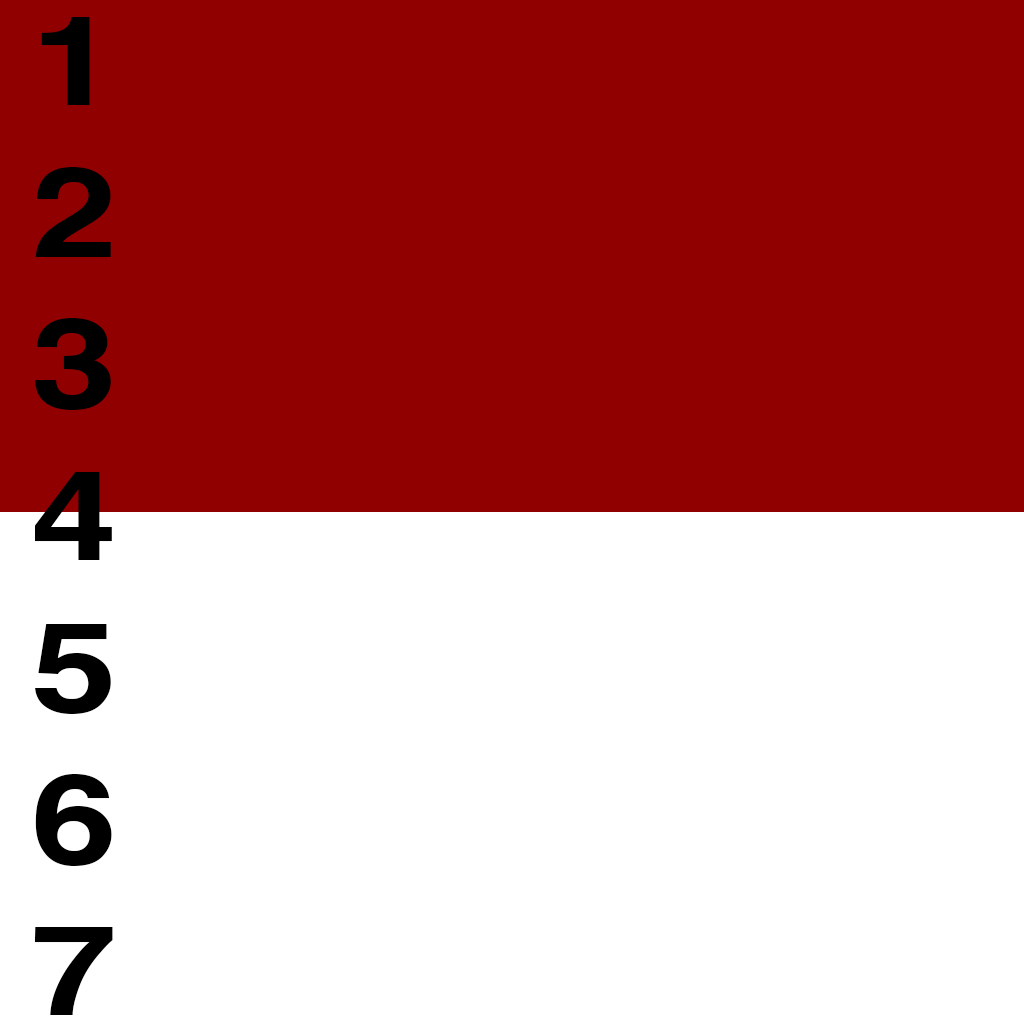
<style>
.page{position:relative;width:1024px;height:1024px;background:#900000}
.page>*{position:absolute;margin:0}
.t1{font:126.5px "Helvetica-Bold";color:#000000;scale:1.22 1}
</style>
<div class="page">
<p class="t1" style="left:34px;top:17px;width:79px;height:998px">1<br>2<br>3<br>4<br>5<br>6<br>7</p>
</div>
